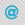
<style>
.page{position:relative;width:25px;height:25px;background:#dddddd}
.page>*{position:absolute;margin:0}
.t1{font:18px "CenturyGothic-Bold";color:#33accd}
</style>
<div class="page">
<p class="t1" style="left:5px;top:5px;width:14px;height:15px">@</p>
</div>
